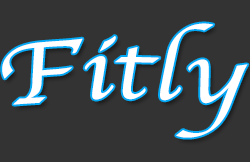
<style>
.page{position:relative;width:250px;height:162px;background:#333333}
.page>*{position:absolute;margin:0}
.t1{font:90px "Apple-Chancery";color:#ffffff}
</style>
<div class="page">
<p class="t1" style="left:2px;top:23px;width:246px;height:115px">Fitly</p>
</div>
